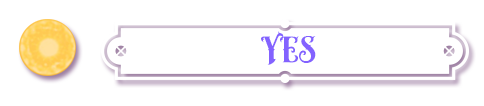
<style>
.page{position:relative;width:484px;height:106px;background:#ffffff}
.page>*{position:absolute;margin:0}
.t1{font:41.7px "Moyers";color:#8362ff}
</style>
<div class="page">
<p class="t1" style="left:261px;top:31px;width:55px;height:34px">YES</p>
</div>
